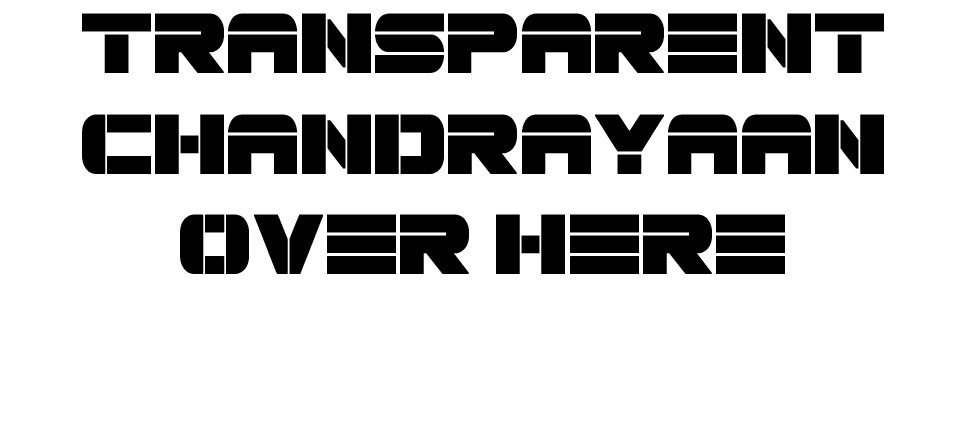
<style>
.page{position:relative;width:970px;height:443px;background:#ffffff}
.page>*{position:absolute;margin:0}
.t1{font:83.6px "Spac3tech";color:#000000;font-weight:bold}
</style>
<div class="page">
<p class="t1" style="left:82px;top:13px;width:802px;height:261px;text-align:center">transparent<br>chandrayaan over here</p>
</div>
